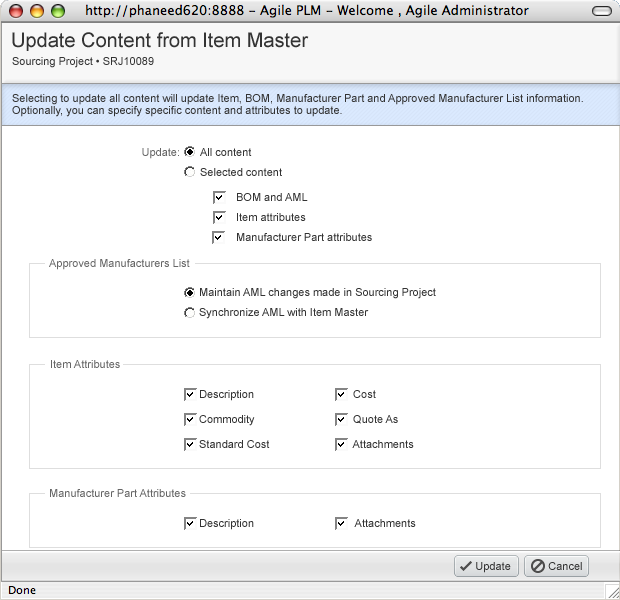
<style>
.page{position:relative;width:620px;height:600px;background:#ffffff}
.page>*{position:absolute;margin:0}
.t1{font:20px "ArialMT";color:#333333}
.t2{font:11px "ArialMT";color:#333333}
.t3{font:11px/12px "ArialMT";color:#333333}
.t4{font:11px "ArialMT";color:#666666}
.t5{font:11px/20px "ArialMT";color:#333333}
.t6{font:11px/25px "ArialMT";color:#333333}
.t7{font:11px/30px "ArialMT";color:#333333}
</style>
<div class="page">
<p class="t1" style="left:12px;top:32px;width:297px;height:19px">Update Content from Item Master</p>
<p class="t2" style="left:12px;top:57px;width:142px;height:11px">Sourcing Project • SRJ10089</p>
<p class="t3" style="left:12px;top:94px;width:571px;height:23px">Selecting to update all content will update Item, BOM, Manufacturer Part and Approved Manufacturer List information.<br>Optionally, you can specify specific content and attributes to update.</p>
<p class="t4" style="left:142px;top:148px;width:37px;height:11px">Update:</p>
<p class="t5" style="left:200px;top:148px;width:82px;height:28px">All content<br>Selected content</p>
<p class="t5" style="left:237px;top:193px;width:135px;height:48px">BOM and AML<br>Item attributes<br>Manufacturer Part attributes</p>
<p class="t4" style="left:49px;top:259px;width:141px;height:11px">Approved Manufacturers List</p>
<p class="t5" style="left:199px;top:288px;width:237px;height:31px">Maintain AML changes made in Sourcing Project<br>Synchronize AML with Item Master</p>
<p class="t4" style="left:51px;top:360px;width:69px;height:8px">Item Attributes</p>
<p class="t6" style="left:199px;top:390px;width:215px;height:58px"><span class="t7"><br></span>Description     Cost<br>Commodity     Quote As<br>Standard Cost     Attachments</p>
<p class="t4" style="left:50px;top:489px;width:136px;height:8px">Manufacturer Part Attributes</p>
<p class="t2" style="left:200px;top:519px;width:216px;height:11px">Description       Attachments</p>
<p class="t2" style="left:476px;top:562px;width:35px;height:11px">Update</p>
<p class="t2" style="left:548px;top:562px;width:34px;height:8px">Cancel</p>
</div>
